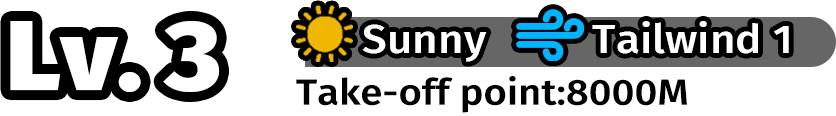
<style>
.page{position:relative;width:836px;height:116px;background:#ffffff}
.page>*{position:absolute;margin:0}
.t1{font:99px "FiraSans-Black";color:#ffffff;scale:1.07 1}
.t2{font:39.6px "FiraSans-Medium";color:#ffffff;scale:1.11 1}
.t3{font:36px "FiraSans-Medium";color:#000000;scale:1.11 1}
</style>
<div class="page">
<p class="t1" style="left:10px;top:21px;width:210px;height:71px">Lv. 3</p>
<p class="t2" style="left:362px;top:24px;width:125px;height:38px">Sunny</p>
<p class="t2" style="left:592px;top:21px;width:197px;height:33px">Tailwind 1</p>
<p class="t3" style="left:296px;top:75px;width:391px;height:38px">Take-off point:8000M</p>
</div>
